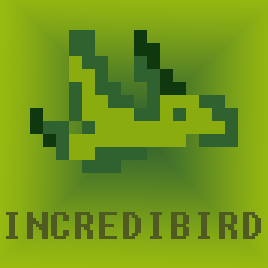
<style>
.page{position:relative;width:268px;height:268px}
.page>*{position:absolute;margin:0}
.t1{font:36px "Fixedsys";color:#505b21}
</style>
<div class="page">
<p class="t1" style="left:6px;top:212px;width:255px;height:27px">INCREDIBIRD</p>
</div>
